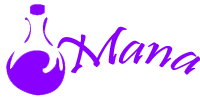
<style>
.page{position:relative;width:200px;height:100px;background:#ffffff}
.page>*{position:absolute;margin:0}
.t1{font:53px "Pristina-Regular";color:#8900fe}
</style>
<div class="page">
<p class="t1" style="left:57px;top:26px;width:144px;height:49px">Mana</p>
</div>
